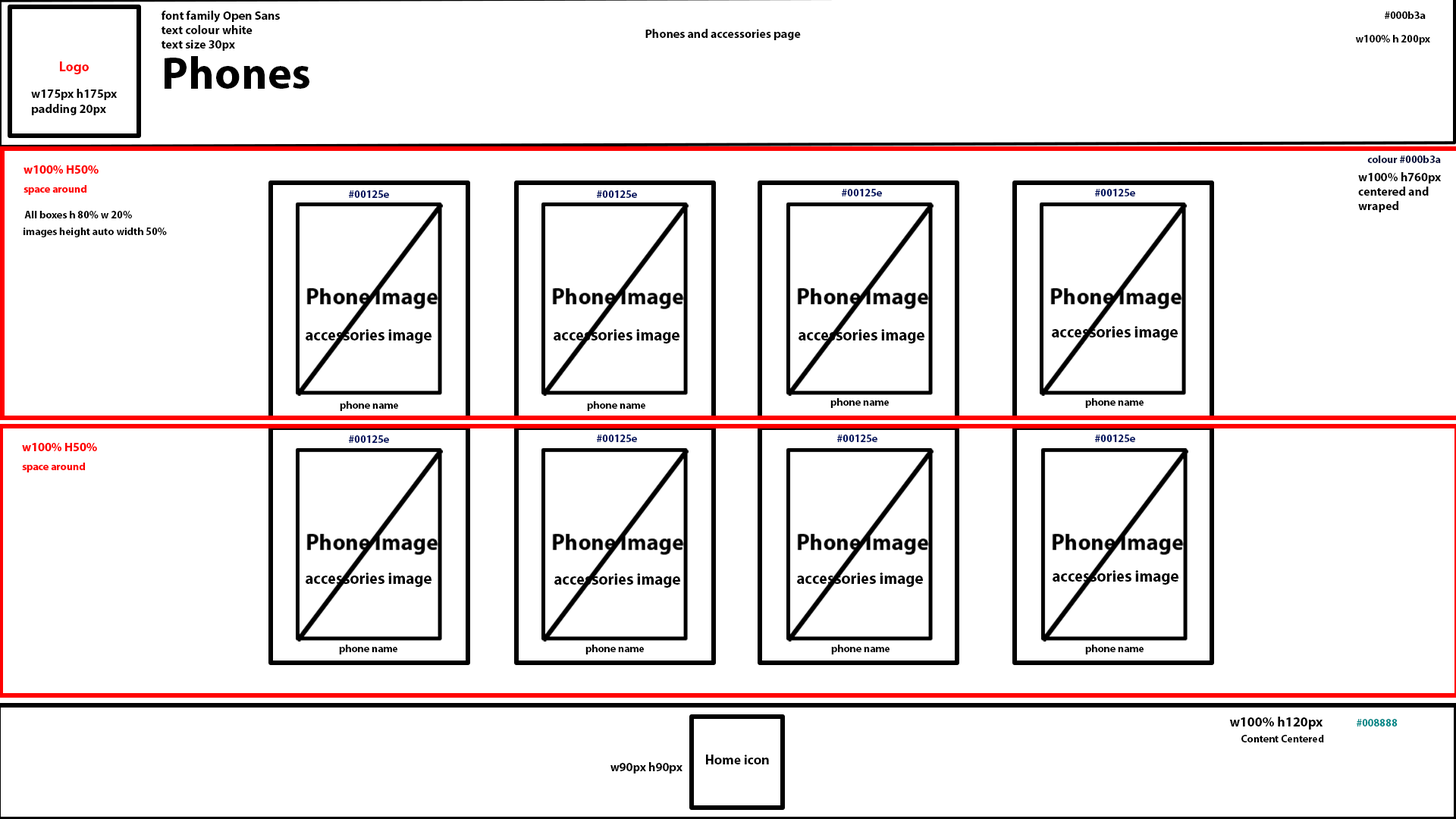
<style>
.page{position:relative;width:1456px;height:819px;background:#ffffff}
.page>*{position:absolute;margin:0}
.t1{font:12.1px "MyriadPro-Bold";color:#000000}
.t2{font:10.6px "MyriadPro-Bold";color:#000000}
.t3{font:13.6px "MyriadPro-Bold";color:#ff0000}
.t4{font:45.5px "MyriadPro-Bold";color:#000000}
.t5{font:10.6px "MyriadPro-Bold";color:#000b3a}
.t6{font:10.6px "MyriadPro-Bold";color:#00125e}
.t7{font:15.9px "MyriadPro-Bold";color:#000000}
.t8{font:13.6px "MyriadPro-Bold";color:#000000}
.t9{font:10.6px "MyriadPro-Bold";color:#008888}
</style>
<div class="page">
<p class="t1" style="left:162px;top:11px;width:118px;height:40px">font family Open Sans<br>text colour white <br>text size 30px</p>
<p class="t2" style="left:1385px;top:11px;width:41px;height:8px">#000b3a</p>
<p class="t1" style="left:645px;top:29px;width:156px;height:11px">Phones and accessories page</p>
<p class="t2" style="left:1355px;top:35px;width:75px;height:10px">w100% h 200px</p>
<p class="t3" style="left:60px;top:61px;width:29px;height:13px">Logo</p>
<p class="t4" style="left:165px;top:56px;width:144px;height:33px">Phones</p>
<p class="t1" style="left:31px;top:89px;width:87px;height:26px">w175px h175px<br>padding 20px</p>
<p class="t5" style="left:1367px;top:155px;width:74px;height:8px">colour #000b3a</p>
<p class="t1" style="left:1358px;top:172px;width:84px;height:40px">w100% h760px <br>centered and <br>wraped</p>
<p class="t6" style="left:349px;top:190px;width:40px;height:8px">#00125e</p>
<p class="t6" style="left:597px;top:190px;width:40px;height:8px">#00125e</p>
<p class="t6" style="left:842px;top:189px;width:40px;height:7px">#00125e</p>
<p class="t6" style="left:1095px;top:189px;width:40px;height:7px">#00125e</p>
<p class="t2" style="left:24px;top:211px;width:108px;height:8px">All boxes h 80% w 20%</p>
<p class="t2" style="left:24px;top:227px;width:143px;height:10px">images height auto width 50%</p>
<p class="t7" style="left:306px;top:329px;width:125px;height:15px">accessories image</p>
<p class="t7" style="left:554px;top:329px;width:125px;height:15px">accessories image</p>
<p class="t7" style="left:799px;top:329px;width:125px;height:15px">accessories image</p>
<p class="t7" style="left:1052px;top:326px;width:126px;height:14px">accessories image</p>
<p class="t2" style="left:340px;top:401px;width:58px;height:10px">phone name</p>
<p class="t2" style="left:587px;top:401px;width:58px;height:10px">phone name</p>
<p class="t2" style="left:830px;top:398px;width:59px;height:10px">phone name</p>
<p class="t2" style="left:1085px;top:398px;width:59px;height:10px">phone name</p>
<p class="t6" style="left:349px;top:435px;width:40px;height:8px">#00125e</p>
<p class="t6" style="left:597px;top:435px;width:40px;height:7px">#00125e</p>
<p class="t6" style="left:837px;top:435px;width:40px;height:7px">#00125e</p>
<p class="t6" style="left:1095px;top:435px;width:40px;height:7px">#00125e</p>
<p class="t7" style="left:306px;top:573px;width:125px;height:14px">accessories image</p>
<p class="t7" style="left:554px;top:573px;width:126px;height:15px">accessories image</p>
<p class="t7" style="left:797px;top:573px;width:126px;height:14px">accessories image</p>
<p class="t7" style="left:1053px;top:570px;width:125px;height:15px">accessories image</p>
<p class="t2" style="left:339px;top:645px;width:58px;height:9px">phone name</p>
<p class="t2" style="left:585px;top:645px;width:59px;height:9px">phone name</p>
<p class="t2" style="left:831px;top:645px;width:59px;height:9px">phone name</p>
<p class="t2" style="left:1085px;top:645px;width:59px;height:9px">phone name</p>
<p class="t8" style="left:1229px;top:717px;width:94px;height:13px">w100% h120px</p>
<p class="t9" style="left:1357px;top:719px;width:41px;height:7px">#008888</p>
<p class="t2" style="left:1241px;top:735px;width:83px;height:7px">Content Centered</p>
<p class="t8" style="left:706px;top:755px;width:63px;height:9px">Home icon</p>
<p class="t1" style="left:610px;top:762px;width:72px;height:11px">w90px h90px</p>
</div>
